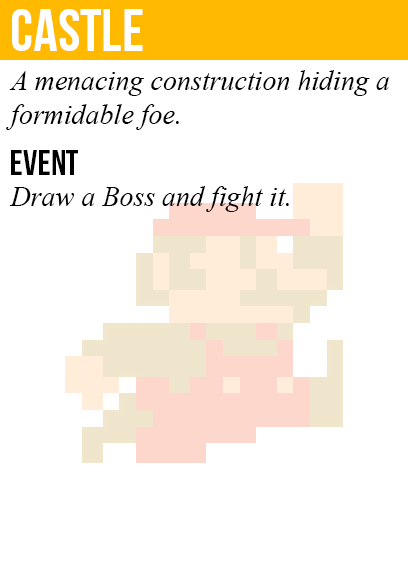
<style>
.page{position:relative;width:408px;height:585px;background:#ffffff}
.page>*{position:absolute;margin:0}
.t1{font:60px "BebasNeue";color:#ffffff}
.t2{font:28px "TimesNewRomanPS-ItalicMT";color:#000000}
.t3{font:36px "BebasNeue";color:#000000}
</style>
<div class="page">
<p class="t1" style="left:12px;top:9px;width:131px;height:42px">castle</p>
<p class="t2" style="left:6px;top:70px;width:383px;height:60px">A menacing construction hiding a<br>formidable foe.</p>
<p class="t3" style="left:11px;top:150px;width:67px;height:25px">event</p>
<p class="t2" style="left:9px;top:186px;width:280px;height:26px">Draw a Boss and fight it.</p>
</div>
